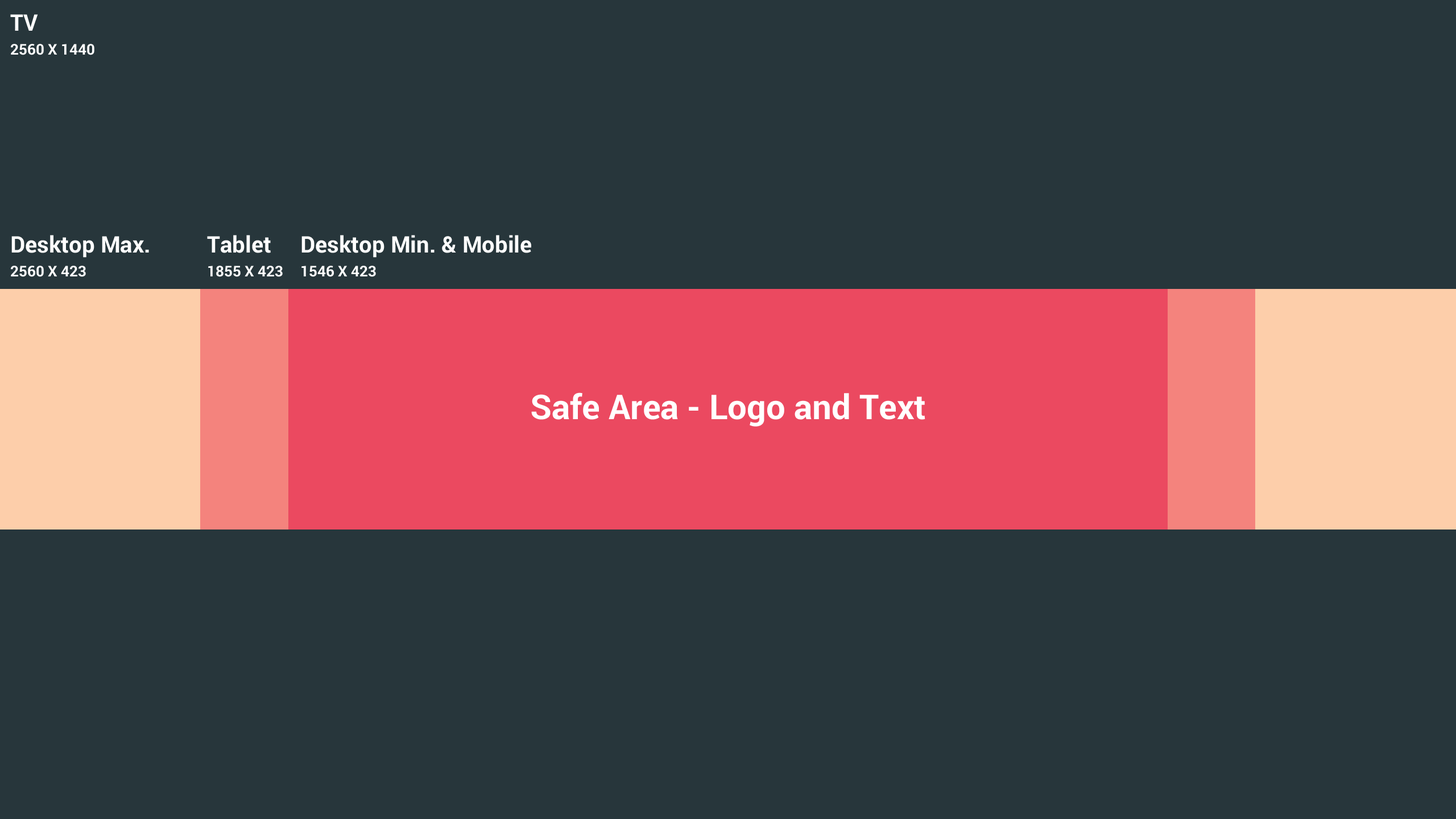
<style>
.page{position:relative;width:1456px;height:819px;background:#27363b}
.page>*{position:absolute;margin:0}
.t1{font:22.7px "Roboto-Bold";color:#ffffff}
.t2{font:14.8px "Roboto-Bold";color:#ffffff;text-transform:uppercase}
.t3{font:34.1px "Roboto-Bold";color:#ffffff}
</style>
<div class="page">
<p class="t1" style="left:10px;top:14px;width:28px;height:17px">TV</p>
<p class="t2" style="left:11px;top:44px;width:83px;height:11px">2560 x 1440</p>
<p class="t1" style="left:11px;top:235px;width:138px;height:23px">Desktop Max.</p>
<p class="t1" style="left:207px;top:235px;width:64px;height:18px">Tablet</p>
<p class="t1" style="left:301px;top:235px;width:230px;height:23px">Desktop Min. &amp; Mobile</p>
<p class="t2" style="left:11px;top:266px;width:75px;height:11px">2560 x 423</p>
<p class="t2" style="left:208px;top:266px;width:75px;height:11px">1855 x 423</p>
<p class="t2" style="left:301px;top:266px;width:75px;height:11px">1546 x 423</p>
<p class="t3" style="left:531px;top:392px;width:394px;height:35px">Safe Area - Logo and Text</p>
</div>
